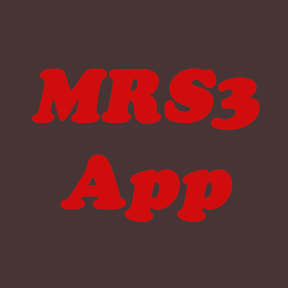
<style>
.page{position:relative;width:288px;height:288px;background:#473535}
.page>*{position:absolute;margin:0}
.t1{font:72px "CooperBlackStd";color:#d00c0c;font-weight:bold;font-style:italic}
</style>
<div class="page">
<p class="t1" style="left:32px;top:68px;width:228px;height:154px;text-align:center">MRS3<br>App</p>
</div>
